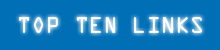
<style>
.page{position:relative;width:220px;height:50px;background:#006fb6}
.page>*{position:absolute;margin:0}
.t1{font:20px "OCRAStd";color:#ffffff}
</style>
<div class="page">
<p class="t1" style="left:19px;top:17px;width:183px;height:16px">TOP TEN LINKS</p>
</div>
